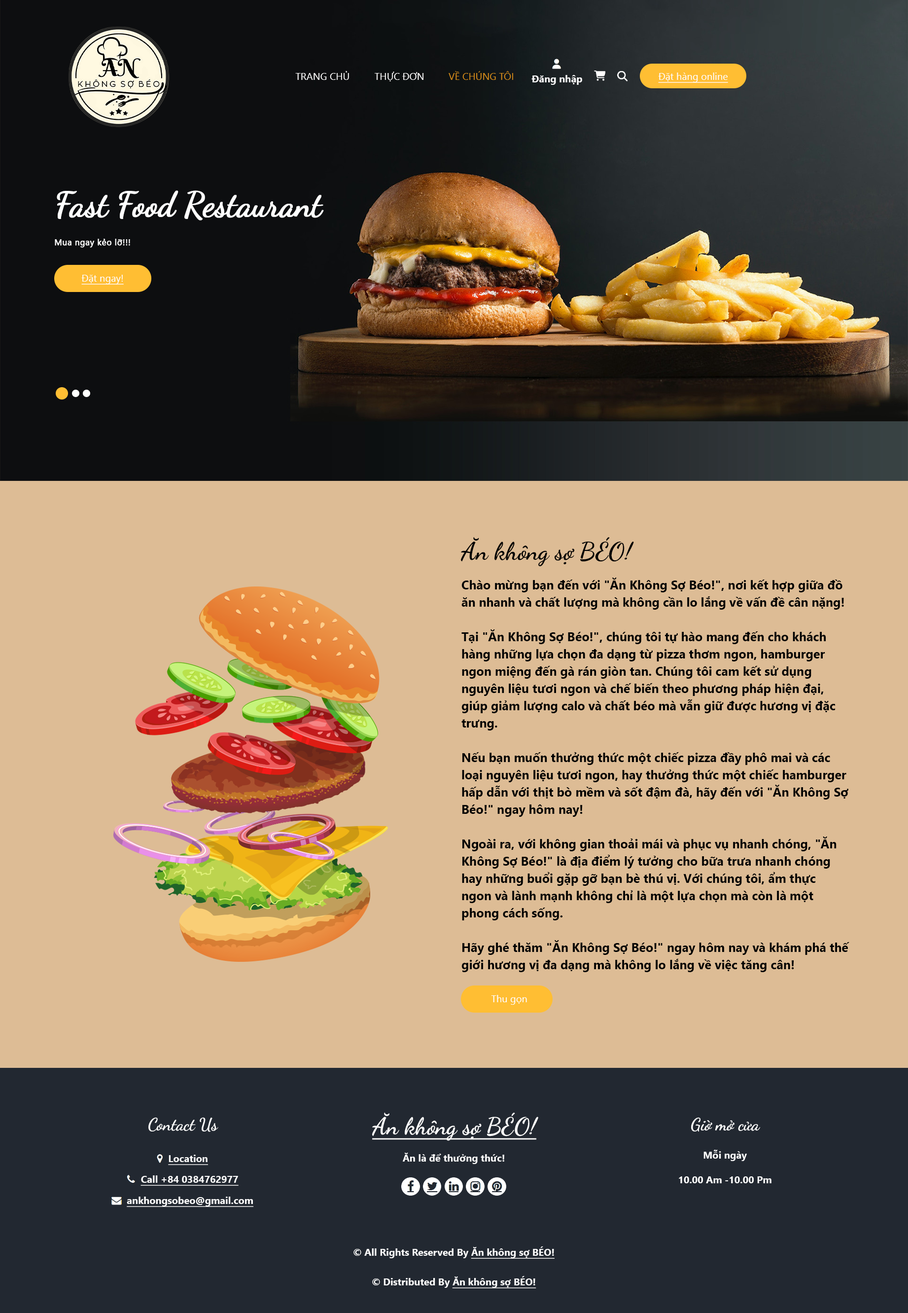
<style>
.page{position:relative;width:908px;height:1313px;background:#ddbc95}
.page>*{position:absolute;margin:0}
.t1{font:9.9px "SegoeUI";color:#ffffff}
.t2{font:9.9px "SegoeUI";color:#d18a19}
.t3{font:9.9px "SegoeUI-Bold";color:#ffffff}
.t4{font:9.9px "SegoeUI";color:#ffffff;text-decoration:underline}
.t5{font:34.5px "DancingScript-Regular";letter-spacing:-0.02em;color:#ffffff;font-weight:bold}
.t6{font:8.4px "SegoeUI";letter-spacing:0.023em;color:#ffffff;font-weight:bold}
.t7{font:24.7px "DancingScript-Bold";color:#000000}
.t8{font:12.3px/17.3px "SegoeUI-Bold";color:#000000}
.t9{font:17.3px "DancingScript-Bold";color:#ffffff}
.t10{font:23.7px "DancingScript-Bold";color:#ffffff;text-decoration:underline}
.t11{font:9.9px "SegoeUI-Bold";color:#ffffff;text-decoration:underline}
</style>
<div class="page">
<p class="t1" style="left:295px;top:71px;width:54px;height:9px">TRANG CHỦ</p>
<p class="t1" style="left:375px;top:72px;width:49px;height:9px">THỰC ĐƠN</p>
<p class="t2" style="left:449px;top:71px;width:64px;height:9px">VỀ CHÚNG TÔI</p>
<p class="t3" style="left:532px;top:75px;width:50px;height:10px">Đăng nhập</p>
<p class="t4" style="left:658px;top:72px;width:70px;height:11px">Đặt hàng online</p>
<p class="t5" style="left:57px;top:190px;width:267px;height:30px">Fast Food Restaurant</p>
<p class="t6" style="left:55px;top:239px;width:75px;height:9px">Mua ngay kẻo lỡ!!!</p>
<p class="t4" style="left:81px;top:275px;width:43px;height:10px">Đặt ngay!</p>
<p class="t7" style="left:461px;top:537px;width:173px;height:29px">Ăn không sợ BÉO!</p>
<p class="t8" style="left:462px;top:577px;width:388px;height:395px">Chào mừng bạn đến với "Ăn Không Sợ Béo!", nơi kết hợp giữa đồ ăn nhanh và chất lượng mà không cần lo lắng về vấn đề cân nặng!<br><br>Tại "Ăn Không Sợ Béo!", chúng tôi tự hào mang đến cho khách hàng những lựa chọn đa dạng từ pizza thơm ngon, hamburger ngon miệng đến gà rán giòn tan. Chúng tôi cam kết sử dụng nguyên liệu tươi ngon và chế biến theo phương pháp hiện đại, giúp giảm lượng calo và chất béo mà vẫn giữ được hương vị đặc trưng.<br><br>Nếu bạn muốn thưởng thức một chiếc pizza đầy phô mai và các loại nguyên liệu tươi ngon, hay thưởng thức một chiếc hamburger hấp dẫn với thịt bò mềm và sốt đậm đà, hãy đến với "Ăn Không Sợ Béo!" ngay hôm nay!<br><br>Ngoài ra, với không gian thoải mái và phục vụ nhanh chóng, "Ăn Không Sợ Béo!" là địa điểm lý tưởng cho bữa trưa nhanh chóng hay những buổi gặp gỡ bạn bè thú vị. Với chúng tôi, ẩm thực ngon và lành mạnh không chỉ là một lựa chọn mà còn là một phong cách sống.<br><br>Hãy ghé thăm "Ăn Không Sợ Béo!" ngay hôm nay và khám phá thế giới hương vị đa dạng mà không lo lắng về việc tăng cân!</p>
<p class="t1" style="left:491px;top:995px;width:36px;height:10px">Thu gọn</p>
<p class="t9" style="left:148px;top:1117px;width:70px;height:15px">Contact Us</p>
<p class="t10" style="left:372px;top:1112px;width:167px;height:29px">Ăn không sợ BÉO!</p>
<p class="t9" style="left:691px;top:1117px;width:69px;height:15px">Giờ mở cửa</p>
<p class="t11" style="left:168px;top:1154px;width:40px;height:11px">Location</p>
<p class="t3" style="left:403px;top:1152px;width:101px;height:12px">Ăn là để thưởng thức!</p>
<p class="t3" style="left:704px;top:1150px;width:43px;height:11px">Mỗi ngày</p>
<p class="t11" style="left:141px;top:1175px;width:98px;height:11px">Call +84 0384762977</p>
<p class="t3" style="left:679px;top:1176px;width:93px;height:7px">10.00 Am -10.00 Pm</p>
<p class="t11" style="left:127px;top:1196px;width:127px;height:11px">ankhongsobeo@gmail.com</p>
<p class="t3" style="left:354px;top:1246px;width:201px;height:12px">© All Rights Reserved By <span class="t11">Ăn không sợ BÉO!</span></p>
<p class="t3" style="left:372px;top:1276px;width:165px;height:12px">© Distributed By <span class="t11">Ăn không sợ BÉO!</span></p>
</div>
